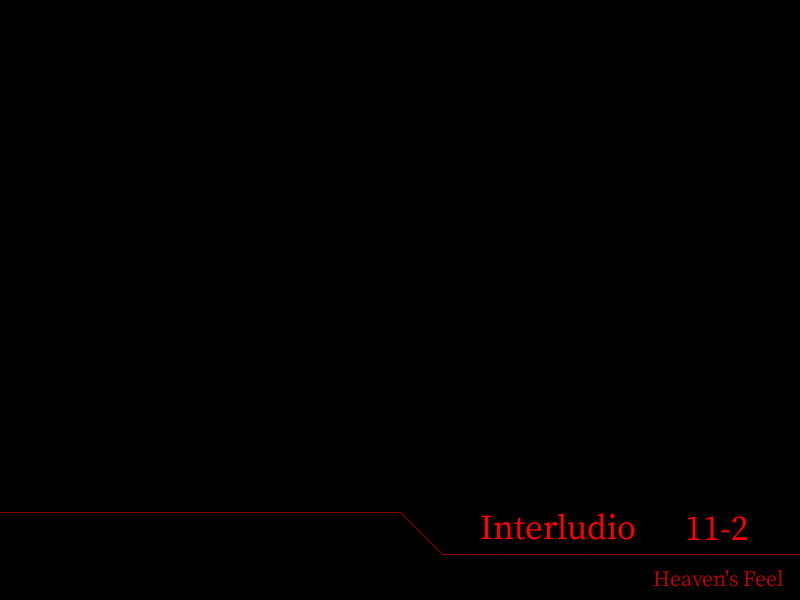
<style>
.page{position:relative;width:800px;height:600px;background:#000000}
.page>*{position:absolute;margin:0}
.t1{font:38px "OfficialFateFont-Medium";color:#ff0000}
.t2{font:24px "OfficialFateFont-Medium";color:#b20000}
</style>
<div class="page">
<p class="t1" style="left:481px;top:513px;width:154px;height:27px">Interludio</p>
<p class="t1" style="left:687px;top:516px;width:60px;height:24px">11-2</p>
<p class="t2" style="left:653px;top:569px;width:130px;height:18px">Heaven's Feel</p>
</div>
